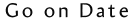
<style>
.page{position:relative;width:132px;height:20px;background:#ffffff}
.page>*{position:absolute;margin:0}
.t1{font:20px "Amira-Roman";letter-spacing:0.15em;color:#000000}
</style>
<div class="page">
<p class="t1" style="left:5px;top:3px;width:123px;height:15px;opacity:0.96">Go on Date</p>
</div>
